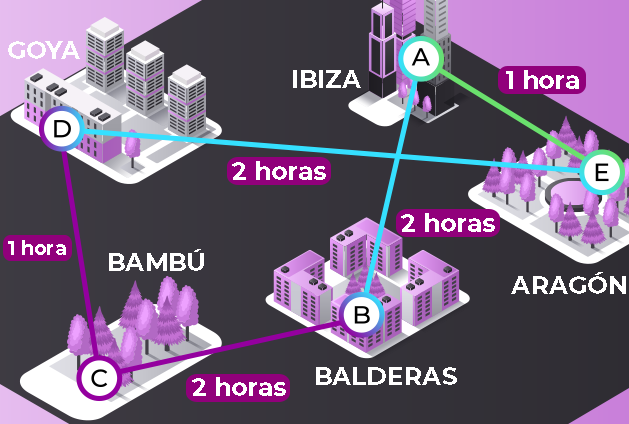
<style>
.page{position:relative;width:629px;height:424px}
.page>*{position:absolute;margin:0}
.t1{font:24.8px "Montserrat-Bold";color:#ffffff}
.t2{font:19.7px "Montserrat-Bold";color:#ffffff}
</style>
<div class="page">
<p class="t1" style="left:8px;top:41px;width:72px;height:18px">GOYA</p>
<p class="t1" style="left:293px;top:70px;width:68px;height:18px">IBIZA</p>
<p class="t1" style="left:506px;top:70px;width:73px;height:19px">1 hora</p>
<p class="t1" style="left:232px;top:161px;width:94px;height:19px">2 horas</p>
<p class="t1" style="left:401px;top:213px;width:94px;height:19px">2 horas</p>
<p class="t2" style="left:8px;top:240px;width:58px;height:15px">1 hora</p>
<p class="t1" style="left:109px;top:249px;width:95px;height:22px">BAMBÚ</p>
<p class="t1" style="left:511px;top:272px;width:115px;height:22px">ARAGÓN</p>
<p class="t1" style="left:192px;top:377px;width:94px;height:19px">2 horas</p>
<p class="t1" style="left:316px;top:367px;width:141px;height:18px">BALDERAS</p>
</div>
